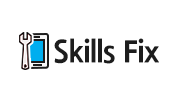
<style>
.page{position:relative;width:185px;height:105px;background:#ffffff}
.page>*{position:absolute;margin:0}
.t1{font:30px "NanumGothicExtraBold";letter-spacing:-0.02em;color:#1d1d1d}
</style>
<div class="page">
<p class="t1" style="left:54px;top:38px;width:105px;height:26px">Skills Fix</p>
</div>
